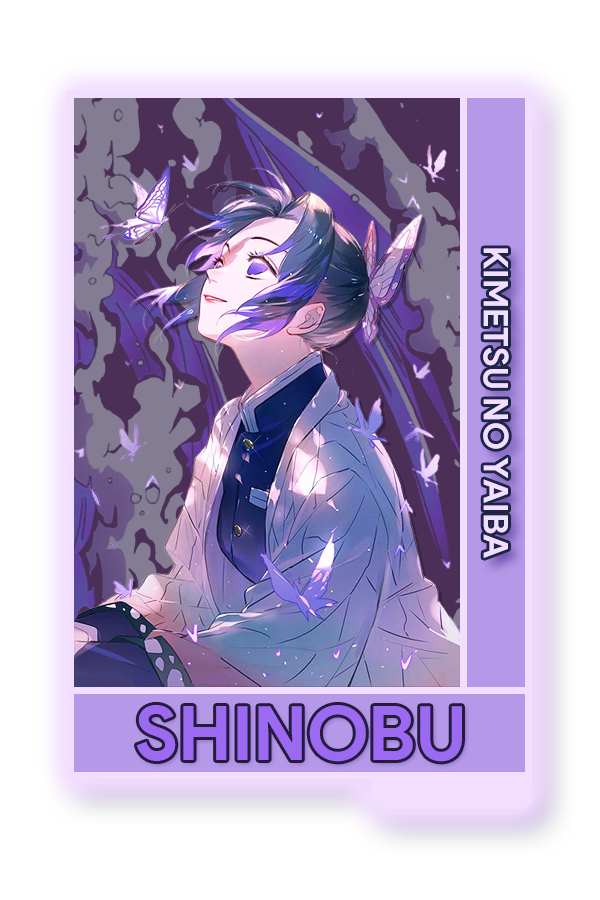
<style>
.page{position:relative;width:600px;height:900px;background:#ffffff}
.page>*{position:absolute;margin:0}
.t1{font:34px "ProductSans-Bold";color:#f2deff}
.t2{font:75px "ProductSans-Bold";color:#9c6af0}
</style>
<div class="page">
<p class="t1" style="left:483px;top:248px;width:26px;height:310px;rotate:90deg">KIMETSU NO YAIBA</p>
<p class="t2" style="left:136px;top:705px;width:326px;height:57px">SHINOBU</p>
</div>
